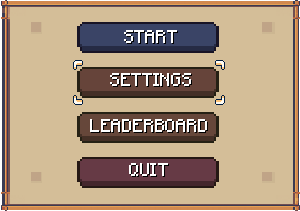
<style>
.page{position:relative;width:300px;height:211px;background:#d4be98}
.page>*{position:absolute;margin:0}
.t1{font:18px "Minecraft-Regular";color:#ffffff}
</style>
<div class="page">
<p class="t1" style="left:124px;top:30px;width:53px;height:13px">START</p>
<p class="t1" style="left:110px;top:73px;width:81px;height:13px">SETTINGS</p>
<p class="t1" style="left:90px;top:119px;width:117px;height:13px">LEADERBOARD</p>
<p class="t1" style="left:129px;top:163px;width:39px;height:13px">QUIT</p>
</div>
